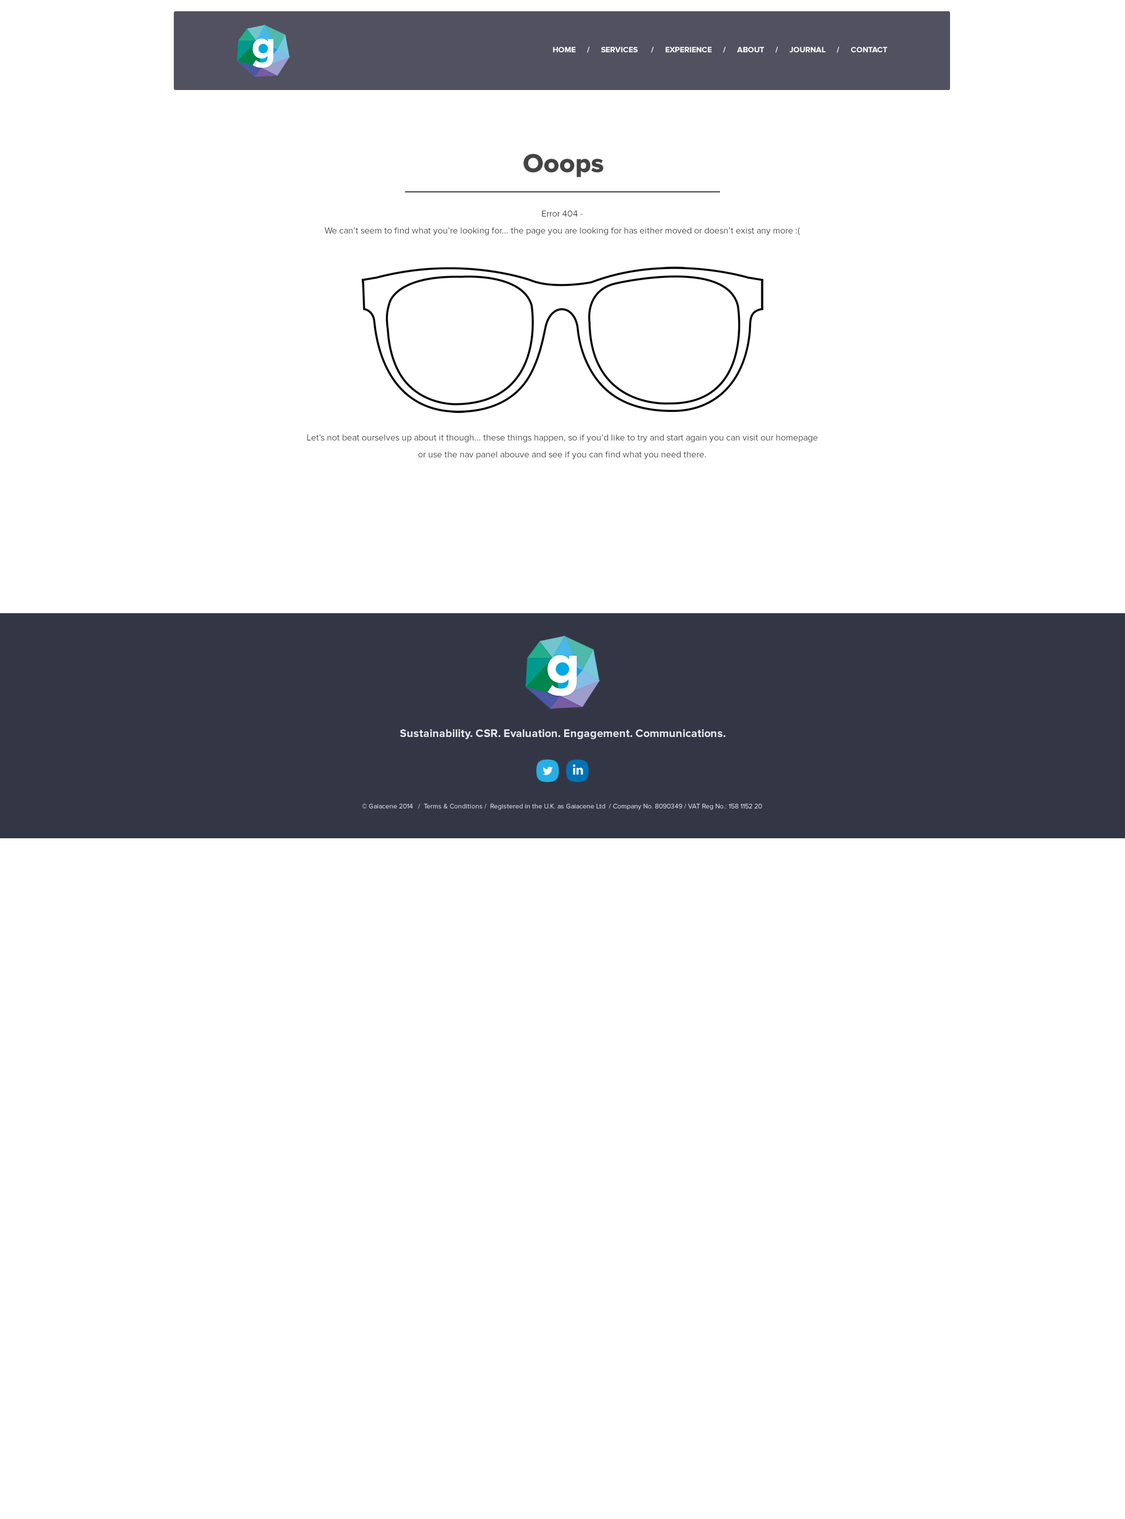
<style>
.page{position:relative;width:1125px;height:1519px;background:#ffffff}
.page>*{position:absolute;margin:0}
.t1{font:7.9px "ProximaNova-Bold";color:#ffffff}
.t2{font:27px "ProximaNova-Extrabld";color:#444444}
.t3{font:9px/16.9px "ProximaNova-Regular";color:#444444}
.t4{font:11.2px "ProximaNova-Bold";color:#e5e9ed}
.t5{font:11.2px "ProximaNova-Bold";letter-spacing:0.003em;color:#e5e9ed}
.t6{font:11.2px "ProximaNova-Bold";letter-spacing:0.008em;color:#e5e9ed}
.t7{font:11.2px "ProximaNova-Bold";letter-spacing:0.022em;color:#e5e9ed}
.t8{font:11.2px "ProximaNova-Bold";letter-spacing:0.004em;color:#e5e9ed}
.t9{font:11.2px "ProximaNova-Bold";letter-spacing:0.001em;color:#e5e9ed}
.t10{font:11.2px "ProximaNova-Bold";letter-spacing:0.009em;color:#e5e9ed}
.t11{font:11.2px "ProximaNova-Bold";letter-spacing:0.012em;color:#e5e9ed}
.t12{font:11.2px "ProximaNova-Bold";letter-spacing:0.019em;color:#e5e9ed}
.t13{font:11.2px "ProximaNova-Bold";letter-spacing:-0.047em;color:#e5e9ed}
.t14{font:11.2px "ProximaNova-Bold";letter-spacing:0.016em;color:#e5e9ed}
.t15{font:11.2px "ProximaNova-Bold";letter-spacing:-0.009em;color:#e5e9ed}
.t16{font:11.2px "ProximaNova-Bold";letter-spacing:0.006em;color:#e5e9ed}
.t17{font:11.2px "ProximaNova-Bold";letter-spacing:0.005em;color:#e5e9ed}
.t18{font:11.2px "ProximaNova-Bold";letter-spacing:0.014em;color:#e5e9ed}
.t19{font:11.2px "ProximaNova-Bold";letter-spacing:0.007em;color:#e5e9ed}
.t20{font:11.2px "ProximaNova-Bold";letter-spacing:0.01em;color:#e5e9ed}
.t21{font:11.2px "ProximaNova-Bold";letter-spacing:-0.001em;color:#e5e9ed}
.t22{font:11.2px "ProximaNova-Bold";letter-spacing:0.002em;color:#e5e9ed}
.t23{font:11.2px "ProximaNova-Bold";letter-spacing:0.018em;color:#e5e9ed}
.t24{font:6.8px "ProximaNova-Regular";color:#dbdbea}
</style>
<div class="page">
<p class="t1" style="left:553px;top:47px;width:335px;height:6px">HOME     /     SERVICES      /     EXPERIENCE     /     ABOUT     /     JOURNAL     /     CONTACT</p>
<p class="t2" style="left:523px;top:154px;width:81px;height:23px">Ooops</p>
<p class="t3" style="left:325px;top:210px;width:475px;height:26px;text-align:center">Error 404 - <br>We can’t seem to find what you’re looking for... the page you are looking for has either moved or doesn’t exist any more :(</p>
<p class="t3" style="left:307px;top:434px;width:511px;height:25px;text-align:center">Let’s not beat ourselves up about it though... these things happen, so if you’d like to try and start again you can visit our homepage or use the nav panel abouve and see if you can find what you need there.</p>
<p class="t4" style="left:400px;top:729px;width:326px;height:10px"><span class="t5">S</span><span class="t6">u</span><span class="t7">s</span><span class="t5">t</span><span class="t8">ai</span><span class="t9">n</span><span class="t10">a</span>bi<span class="t9">l</span><span class="t11">i</span><span class="t12">t</span><span class="t13">y</span>. <span class="t12">C</span>S<span class="t14">R</span>. <span class="t15">E</span>v<span class="t16">a</span><span class="t5">l</span><span class="t17">u</span><span class="t18">a</span><span class="t15">t</span>i<span class="t16">o</span>n. E<span class="t17">ng</span><span class="t19">a</span><span class="t10">ge</span><span class="t19">m</span><span class="t10">e</span><span class="t20">n</span><span class="t21">t</span>. <span class="t9">C</span><span class="t16">o</span><span class="t19">m</span><span class="t8">m</span><span class="t6">u</span><span class="t22">ni</span><span class="t23">c</span><span class="t18">a</span><span class="t15">t</span>i<span class="t16">on</span><span class="t22">s</span>.</p>
<p class="t24" style="left:362px;top:803px;width:400px;height:7px">© Gaiacene 2014   /  Terms &amp; Conditions /  Registered in the U.K. as Gaiacene Ltd  / Company No. 8090349 / VAT Reg No.: 158 1152 20</p>
</div>
